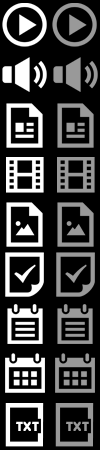
<style>
.page{position:relative;width:100px;height:450px;background:#000000}
.page>*{position:absolute;margin:0}
.t1{font:13.4px "BerlinSansFBDemi-Bold";letter-spacing:0.025em;color:#ffffff}
.t2{font:13.4px "BerlinSansFBDemi-Bold";letter-spacing:0.025em;color:#999999}
</style>
<div class="page">
<p class="t1" style="left:16px;top:421px;width:23px;height:10px">TXT</p>
<p class="t2" style="left:66px;top:421px;width:23px;height:10px">TXT</p>
</div>
